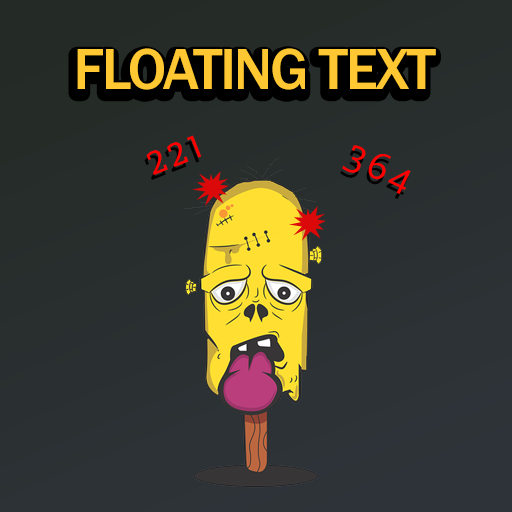
<style>
.page{position:relative;width:512px;height:512px}
.page>*{position:absolute;margin:0}
.t1{font:60px "FranklinGothic-Medium";letter-spacing:-0.04em;color:#ffc731;text-transform:uppercase}
.t2{font:40.3px "Slabo27px-Regular";letter-spacing:0.1em;color:#ff0000;text-transform:uppercase}
</style>
<div class="page">
<p class="t1" style="left:77px;top:48px;width:359px;height:42px">FLOATING TEXT</p>
<p class="t2" style="left:146px;top:135px;width:56px;height:40px;rotate:-22deg">221</p>
<p class="t2" style="left:342px;top:145px;width:69px;height:49px;rotate:26deg">364</p>
</div>
